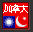
<style>
.page{position:relative;width:33px;height:32px;background:#333333}
.page>*{position:absolute;margin:0}
.t1{font:10.4px "SimSun";letter-spacing:-0.25em;color:#ffffff}
</style>
<div class="page">
<p class="t1" style="left:3px;top:4px;width:25px;height:9px">加拿大</p>
</div>
